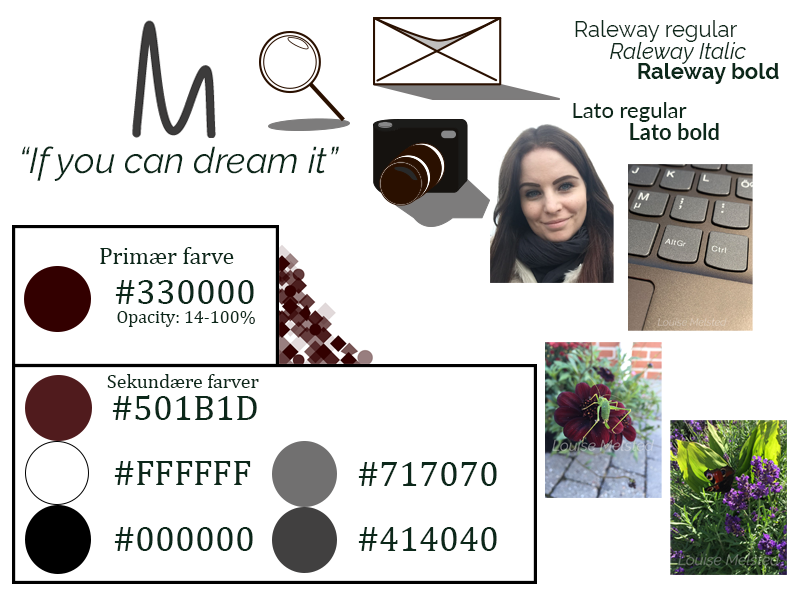
<style>
.page{position:relative;width:800px;height:600px;background:#ffffff}
.page>*{position:absolute;margin:0}
.t1{font:22px "Raleway-Regular";color:#0c281a}
.t2{font:22px "Raleway-Italic";color:#0c281a}
.t3{font:22px "Raleway-Bold";color:#0c281a}
.t4{font:22px "Lato-Regular";color:#0c281a}
.t5{font:22px "Lato-Bold";color:#0c281a}
.t6{font:36px "Raleway-Italic";color:#0c281a}
.t7{font:24px "Cambria";color:#0c281a}
.t8{font:36px "Cambria";color:#0c281a}
.t9{font:18px "Cambria";color:#0c281a}
.t10{font:20px "Cambria";color:#0c281a}
</style>
<div class="page">
<p class="t1" style="left:575px;top:20px;width:162px;height:22px">Raleway regular</p>
<p class="t2" style="left:610px;top:42px;width:136px;height:22px">Raleway Italic</p>
<p class="t3" style="left:638px;top:63px;width:141px;height:21px">Raleway bold</p>
<p class="t4" style="left:573px;top:102px;width:114px;height:20px">Lato regular</p>
<p class="t5" style="left:630px;top:123px;width:89px;height:17px">Lato bold</p>
<p class="t6" style="left:22px;top:146px;width:317px;height:35px">“If you can dream it”</p>
<p class="t7" style="left:100px;top:247px;width:134px;height:17px">Primær farve</p>
<p class="t8" style="left:115px;top:280px;width:139px;height:24px">#330000</p>
<p class="t9" style="left:117px;top:311px;width:138px;height:16px">Opacity: 14-100%</p>
<p class="t10" style="left:107px;top:374px;width:152px;height:14px">Sekundære farver</p>
<p class="t8" style="left:112px;top:395px;width:145px;height:25px">#501B1D</p>
<p class="t8" style="left:114px;top:461px;width:137px;height:24px">#FFFFFF</p>
<p class="t8" style="left:358px;top:462px;width:139px;height:24px">#717070</p>
<p class="t8" style="left:114px;top:527px;width:139px;height:24px">#000000</p>
<p class="t8" style="left:358px;top:527px;width:139px;height:24px">#414040</p>
</div>
